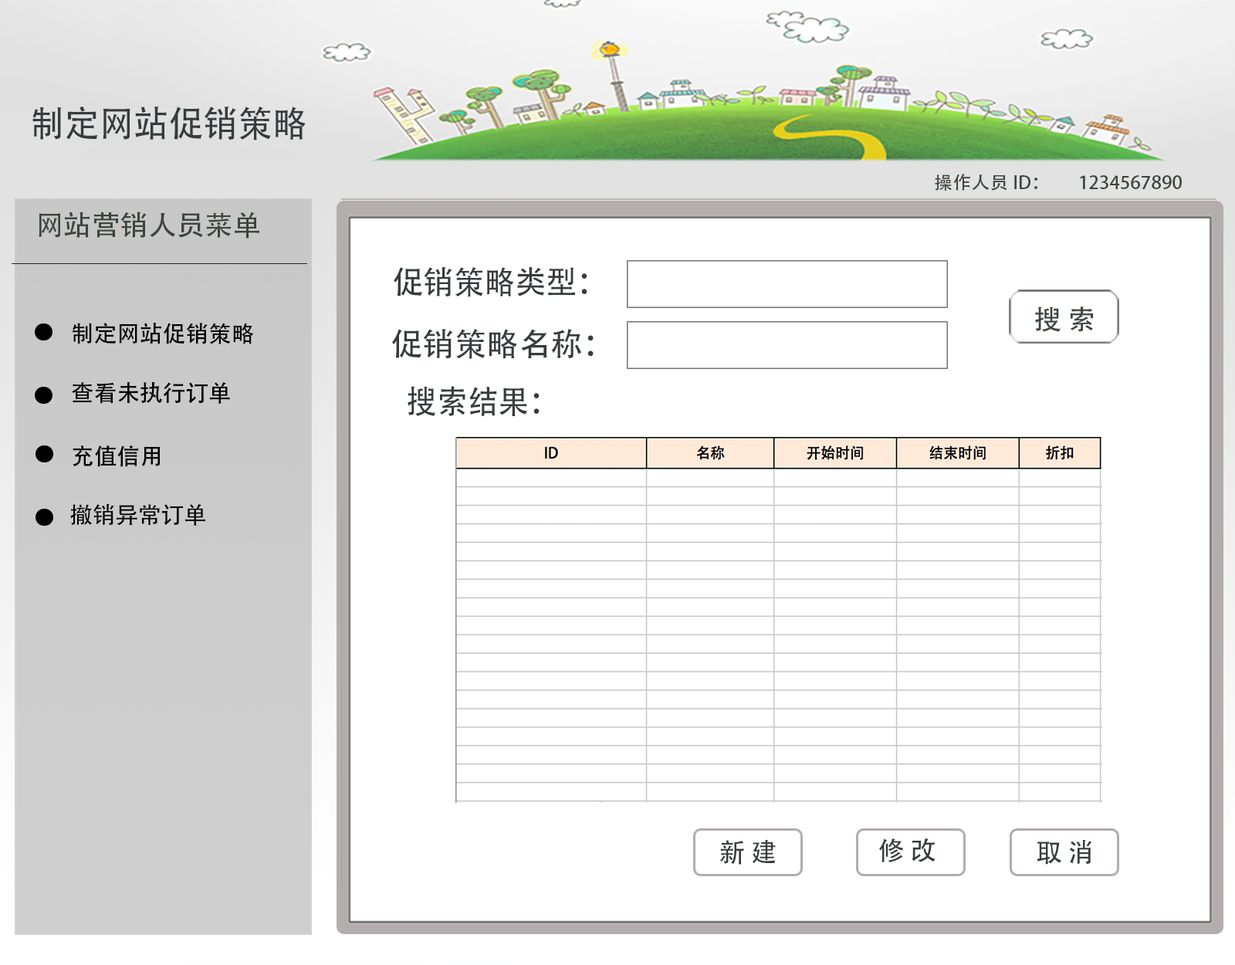
<style>
.page{position:relative;width:1235px;height:965px;background:#ffffff}
.page>*{position:absolute;margin:0}
.t1{font:36.3px "AdobeHeitiStd-Regular";letter-spacing:-0.005em;color:#363c3c;text-transform:uppercase;scale:0.96 1}
.t2{font:17.8px "AdobeHeitiStd-Regular";color:#3b453e;scale:1.04 1}
.t3{font:28.1px "AdobeHeitiStd-Regular";color:#3b453e}
.t4{font:32.2px "AdobeHeitiStd-Regular";letter-spacing:-0.005em;color:#363c3c;text-transform:uppercase;scale:0.96 1}
.t5{font:22.8px "AdobeHeitiStd-Regular";color:#010101}
.t6{font:32.2px "AdobeHeitiStd-Regular";letter-spacing:-0.005em;color:#363c3c;text-transform:uppercase}
.t7{font:22.8px "AdobeHeitiStd-Regular";color:#000000}
.t8{font:22.8px "AdobeHeitiStd-Regular";letter-spacing:-0.005em;color:#000000;text-transform:uppercase}
</style>
<div class="page">
<p class="t1" style="left:32px;top:106px;width:274px;height:35px">制定网站促销策略</p>
<p class="t2" style="left:935px;top:174px;width:247px;height:17px">操作人员ID：        1234567890</p>
<p class="t3" style="left:39px;top:212px;width:220px;height:27px">网站营销人员菜单</p>
<p class="t4" style="left:394px;top:266px;width:194px;height:31px">促销策略类型：</p>
<p class="t5" style="left:73px;top:323px;width:180px;height:21px">制定网站促销策略</p>
<p class="t6" style="left:391px;top:329px;width:203px;height:30px">促销策略名称：</p>
<p class="t7" style="left:72px;top:381px;width:158px;height:23px">查看未执行订单</p>
<p class="t4" style="left:408px;top:386px;width:132px;height:30px">搜索结果：</p>
<p class="t7" style="left:73px;top:446px;width:88px;height:21px">充值信用</p>
<p class="t8" style="left:70px;top:504px;width:135px;height:22px">撤销异常订单</p>
</div>
